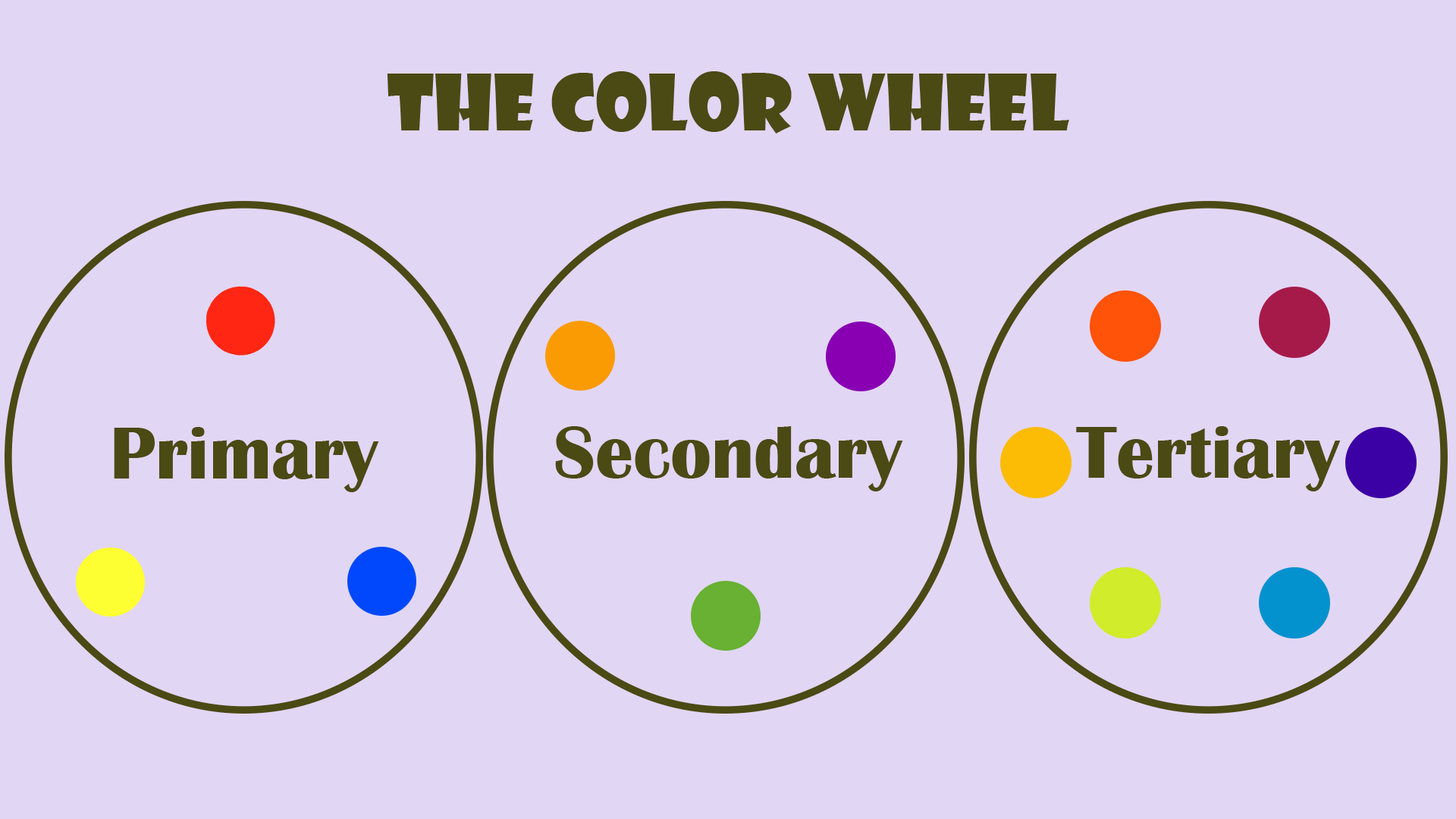
<style>
.page{position:relative;width:1456px;height:819px;background:#e2d6f5}
.page>*{position:absolute;margin:0}
.t1{font:75.8px "ShowcardGothic-Reg";color:#4b4914}
.t2{font:75.8px "BritannicBold";color:#4b4914}
</style>
<div class="page">
<p class="t1" style="left:387px;top:71px;width:682px;height:62px">The Color Wheel</p>
<p class="t2" style="left:114px;top:427px;width:265px;height:65px">Primary</p>
<p class="t2" style="left:555px;top:426px;width:348px;height:65px">Secondary</p>
<p class="t2" style="left:1076px;top:426px;width:265px;height:65px">Tertiary</p>
</div>
